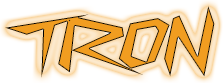
<style>
.page{position:relative;width:223px;height:83px;background:#ffffff}
.page>*{position:absolute;margin:0}
.t1{font:72px "CyberwayRiders";color:#f19d20}
</style>
<div class="page">
<p class="t1" style="left:5px;top:6px;width:210px;height:72px">TRON</p>
</div>
